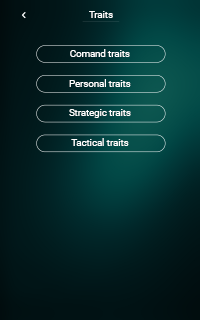
<style>
.page{position:relative;width:200px;height:320px}
.page>*{position:absolute;margin:0}
.t1{font:9.5px "Roboto-Regular";color:#ffffff}
</style>
<div class="page">
<p class="t1" style="left:89px;top:11px;width:24px;height:7px">Traits</p>
<p class="t1" style="left:70px;top:49px;width:60px;height:8px">Comand traits</p>
<p class="t1" style="left:69px;top:79px;width:62px;height:8px">Personal traits</p>
<p class="t1" style="left:69px;top:109px;width:62px;height:9px">Strategic traits</p>
<p class="t1" style="left:71px;top:138px;width:58px;height:8px">Tactical traits</p>
</div>
